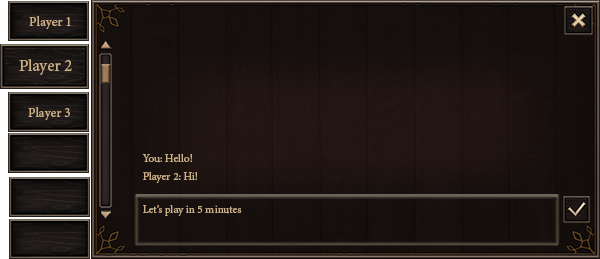
<style>
.page{position:relative;width:600px;height:259px}
.page>*{position:absolute;margin:0}
.t1{font:13.5px "MinionPro-Regular";color:#cdb087}
.t2{font:16.9px "MinionPro-Regular";color:#cdb087}
.t3{font:11.3px "MinionPro-Regular";color:#cdb087}
</style>
<div class="page">
<p class="t1" style="left:29px;top:16px;width:42px;height:13px">Player 1</p>
<p class="t2" style="left:19px;top:59px;width:53px;height:16px">Player 2</p>
<p class="t1" style="left:28px;top:107px;width:42px;height:13px">Player 3</p>
<p class="t3" style="left:142px;top:154px;width:50px;height:9px">You: Hello!</p>
<p class="t3" style="left:143px;top:172px;width:54px;height:11px">Player 2: Hi!</p>
<p class="t3" style="left:143px;top:205px;width:99px;height:11px">Let’s play in 5 minutes</p>
</div>
